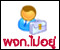
<style>
.page{position:relative;width:60px;height:50px;background:#ffffff}
.page>*{position:absolute;margin:0}
.t1{font:17px "PSLxKittithada-Bold";color:#c70b33;font-weight:bold}
</style>
<div class="page">
<p class="t1" style="left:3px;top:35px;width:53px;height:14px">ผจก.ไม่อยู่</p>
</div>
